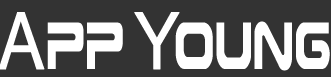
<style>
.page{position:relative;width:331px;height:77px;background:#333333}
.page>*{position:absolute;margin:0}
.t1{font:66.7px "PlanetEarth";color:#ffffff;scale:0.58 1}
.t2{font:87.5px "Raavi";color:#ffffff;font-weight:bold;scale:0.86 1}
.t3{font:66.7px "PlanetEarth";color:#ffffff;scale:0.6 1}
.t4{font:87.5px "Raavi";letter-spacing:-0.1em;color:#ffffff;font-weight:bold;scale:0.86 1}
</style>
<div class="page">
<p class="t1" style="left:0px;top:12px;width:330px;height:59px"><span class="t2">A</span><span class="t3">pp </span><span class="t4">Y</span>oung</p>
</div>
